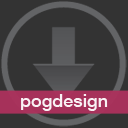
<style>
.page{position:relative;width:128px;height:128px;background:#333333}
.page>*{position:absolute;margin:0}
.t1{font:18px "HelveticaNeue-Medium";color:#ffffff}
</style>
<div class="page">
<p class="t1" style="left:21px;top:94px;width:87px;height:17px;opacity:0.93">pogdesign</p>
</div>
